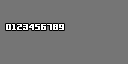
<style>
.page{position:relative;width:128px;height:64px;background:#757575}
.page>*{position:absolute;margin:0}
.t1{font:16px "Gamer";color:#ffffff}
</style>
<div class="page">
<p class="t1" style="left:5px;top:24px;width:59px;height:6px">0123456789</p>
</div>
